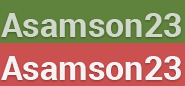
<style>
.page{position:relative;width:185px;height:86px;background:#cb5151}
.page>*{position:absolute;margin:0}
.t1{font:34px "Roboto-Bold";color:#d0d9c9}
.t2{font:34px "Roboto-Bold";color:#ffffff}
</style>
<div class="page">
<p class="t1" style="left:1px;top:13px;width:180px;height:24px">Asamson23</p>
<p class="t2" style="left:1px;top:56px;width:180px;height:24px">Asamson23</p>
</div>
